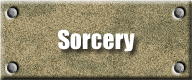
<style>
.page{position:relative;width:192px;height:80px}
.page>*{position:absolute;margin:0}
.t1{font:24px "Impact";color:#ffffff}
</style>
<div class="page">
<p class="t1" style="left:58px;top:29px;width:77px;height:23px">Sorcery</p>
</div>
